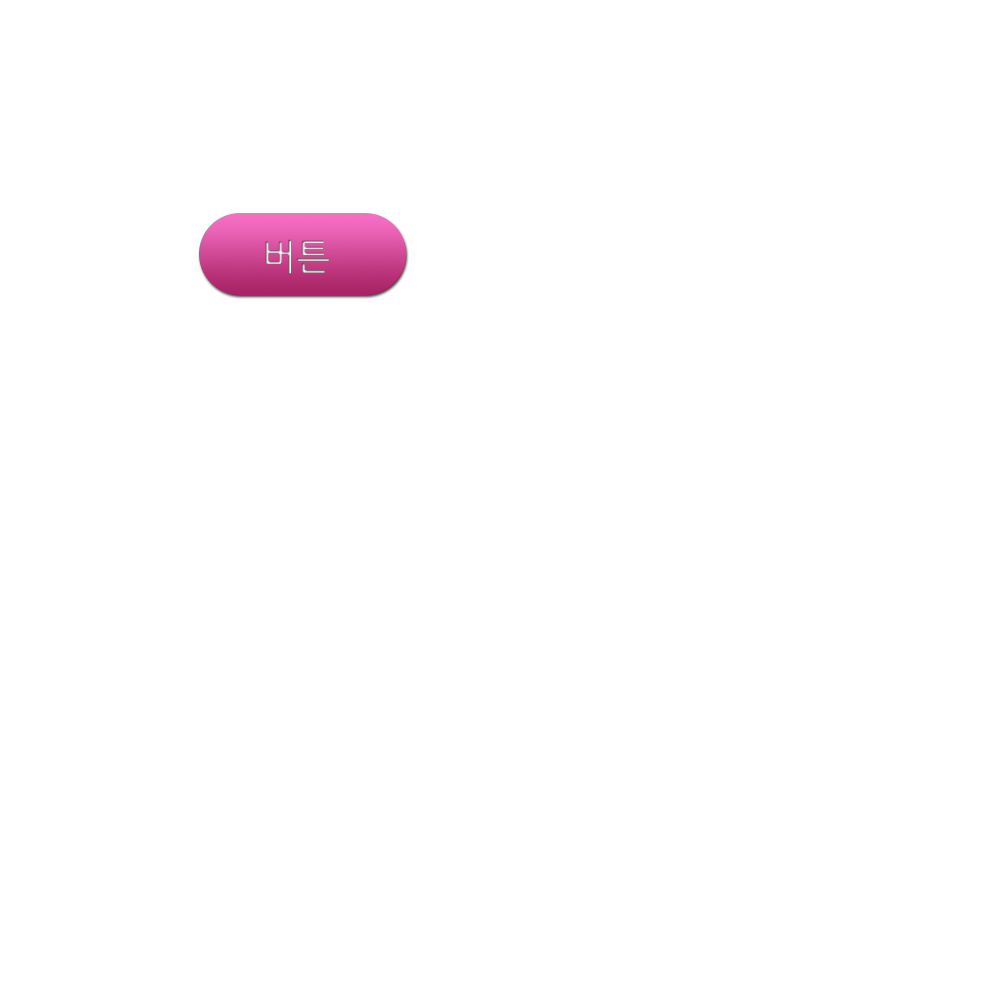
<style>
.page{position:relative;width:1000px;height:1000px;background:#ffffff}
.page>*{position:absolute;margin:0}
.t1{font:36px "NanumGothic"}
</style>
<div class="page">
<p class="t1" style="left:265px;top:239px;width:64px;height:35px">버튼</p>
</div>
